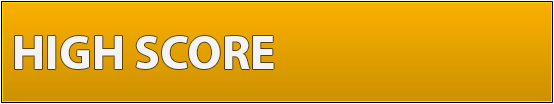
<style>
.page{position:relative;width:554px;height:104px}
.page>*{position:absolute;margin:0}
.t1{font:48px "MyriadHebrew-Bold";color:#f4f4f4}
</style>
<div class="page">
<p class="t1" style="left:15px;top:36px;width:259px;height:33px">HIGH SCORE</p>
</div>
